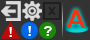
<style>
.page{position:relative;width:90px;height:40px;background:#333333}
.page>*{position:absolute;margin:0}
.t1{font:14px "Arial-BoldMT";letter-spacing:0.005em;color:#1f1f20;scale:1.05 1}
.t2{font:27px "CenturyGothic-Bold";letter-spacing:0.005em;color:#ee3516}
.t3{font:14px "Arial-BoldMT";letter-spacing:0.005em;color:#ffffff;scale:1.05 1}
</style>
<div class="page">
<p class="t1" style="left:48px;top:7px;width:8px;height:8px">x</p>
<p class="t2" style="left:66px;top:9px;width:20px;height:19px">A</p>
<p class="t3" style="left:9px;top:27px;width:3px;height:10px">!</p>
<p class="t3" style="left:28px;top:26px;width:3px;height:10px">!</p>
<p class="t3" style="left:44px;top:26px;width:8px;height:10px">?</p>
</div>
